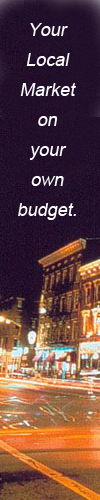
<style>
.page{position:relative;width:100px;height:500px}
.page>*{position:absolute;margin:0}
.t1{font:18px/30px "ArialMT";color:#ffffff;font-style:italic}
</style>
<div class="page">
<p class="t1" style="left:18px;top:23px;width:58px;height:197px;text-align:center">Your<br>Local<br>Market<br>on<br>your<br>own<br>budget.</p>
</div>
